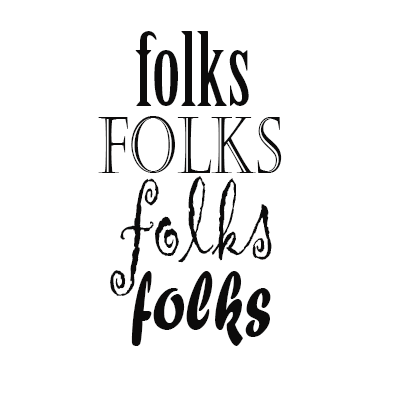
<style>
.page{position:relative;width:400px;height:400px;background:#ffffff}
.page>*{position:absolute;margin:0}
.t1{font:100px "BirchStd";color:#0c0b0b}
.t2{font:78.3px "Castellar";color:#0c0b0b;scale:0.7 1}
.t3{font:99.7px "Gigi-Regular";color:#0c0b0b;scale:0.77 1}
.t4{font:86.7px "ForteMT";color:#0c0b0b;scale:0.7 1}
</style>
<div class="page">
<p class="t1" style="left:135px;top:31px;width:114px;height:75px">folks</p>
<p class="t2" style="left:98px;top:116px;width:184px;height:57px">folks</p>
<p class="t3" style="left:110px;top:176px;width:162px;height:120px">folks</p>
<p class="t4" style="left:131px;top:271px;width:140px;height:75px">folks</p>
</div>
